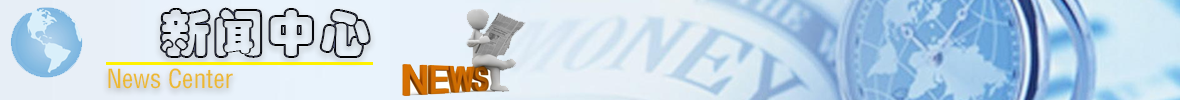
<style>
.page{position:relative;width:1180px;height:100px}
.page>*{position:absolute;margin:0}
.t1{font:52.9px "STCaiyun"}
.t2{font:25.6px "FZYTK--GBK1-0";color:#ecb931}
</style>
<div class="page">
<p class="t1" style="left:160px;top:7px;width:211px;height:51px">新闻中心</p>
<p class="t2" style="left:108px;top:68px;width:125px;height:21px">News Center</p>
</div>
